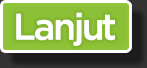
<style>
.page{position:relative;width:147px;height:68px}
.page>*{position:absolute;margin:0}
.t1{font:37px "iCielGotham-Medium";letter-spacing:-0.06em;color:#ffffff}
</style>
<div class="page">
<p class="t1" style="left:16px;top:12px;width:99px;height:34px">Lanjut</p>
</div>
